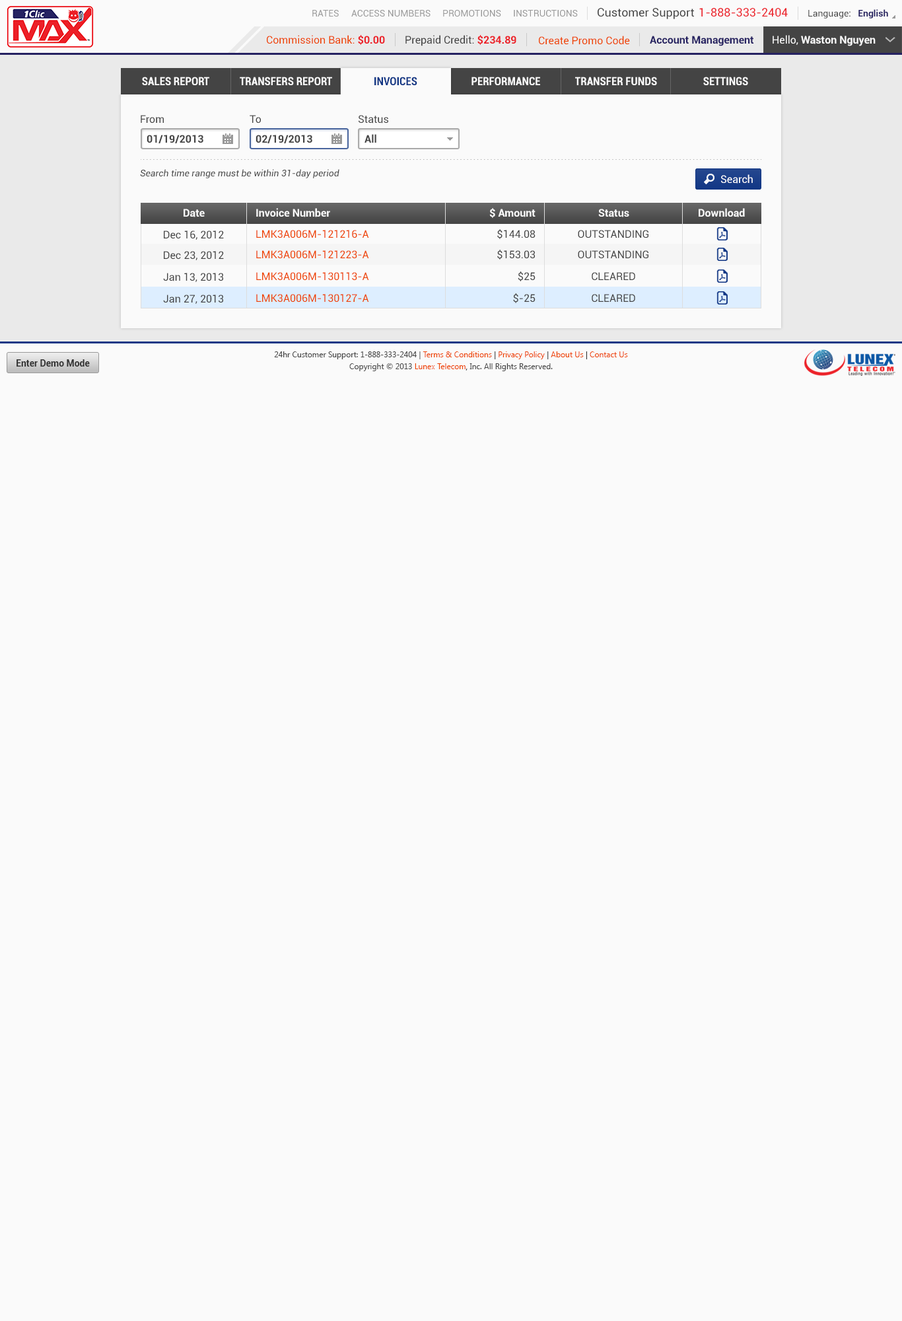
<style>
.page{position:relative;width:902px;height:1321px;background:#fafafa}
.page>*{position:absolute;margin:0}
.t1{font:9.2px "Roboto-Regular";color:#999999}
.t2{font:11.6px "Roboto-Regular";color:#444444}
.t3{font:11.6px "Roboto-Regular";color:#ec2029}
.t4{font:9.2px "Roboto-Regular";color:#444444}
.t5{font:9.2px "Roboto-Bold";color:#262262}
.t6{font:10.6px "Roboto-Regular";color:#ee4400}
.t7{font:10.6px "Roboto-Bold";color:#ec2028}
.t8{font:10.6px "Roboto-Regular";color:#444444}
.t9{font:10.6px "Roboto-Bold";color:#262262}
.t10{font:10.6px "Roboto-Bold";color:#fafafa}
.t11{font:10.6px "Roboto-Regular";color:#fafafa}
.t12{font:11.2px "Roboto-BoldCondensed";color:#fafafa}
.t13{font:11.2px "Roboto-BoldCondensed";color:#123785}
.t14{font:10.6px "Roboto-Bold";color:#444444}
.t15{font:9.2px "Roboto-Italic";color:#444444}
.t16{font:10.6px "Roboto-Regular";color:#ffffff}
.t17{font:7.9px/11.9px "SegoeUI";color:#444444}
.t18{font:7.9px/11.9px "SegoeUI";color:#ee4400}
.t19{font:7.9px/11.9px "SegoeUI";color:#333333}
.t20{font:9.2px "Roboto-Bold";color:#333333}
</style>
<div class="page">
<p class="t1" style="left:312px;top:10px;width:27px;height:7px">RATES</p>
<p class="t1" style="left:351px;top:10px;width:80px;height:7px">ACCESS NUMBERS</p>
<p class="t1" style="left:443px;top:10px;width:58px;height:7px">PROMOTIONS</p>
<p class="t1" style="left:514px;top:10px;width:64px;height:7px">INSTRUCTIONS</p>
<p class="t2" style="left:598px;top:8px;width:96px;height:11px">Customer Support</p>
<p class="t3" style="left:700px;top:8px;width:88px;height:9px">1-888-333-2404</p>
<p class="t4" style="left:809px;top:9px;width:80px;height:9px">Language:   <span class="t5">English</span></p>
<p class="t6" style="left:267px;top:35px;width:118px;height:10px">Commission Bank: <span class="t7">$0.00</span></p>
<p class="t8" style="left:406px;top:35px;width:111px;height:11px">Prepaid Credit: <span class="t7">$234.89</span></p>
<p class="t6" style="left:539px;top:36px;width:91px;height:9px">Create Promo Code</p>
<p class="t9" style="left:650px;top:36px;width:104px;height:10px">Account Management</p>
<p class="t10" style="left:773px;top:35px;width:103px;height:11px"><span class="t11">Hello, </span>Waston Nguyen</p>
<p class="t12" style="left:142px;top:77px;width:67px;height:8px">SALES REPORT</p>
<p class="t12" style="left:240px;top:77px;width:92px;height:8px">TRANSFERS REPORT</p>
<p class="t13" style="left:375px;top:77px;width:43px;height:8px">INVOICES</p>
<p class="t12" style="left:472px;top:77px;width:68px;height:8px">PERFORMANCE</p>
<p class="t12" style="left:575px;top:77px;width:82px;height:8px">TRANSFER FUNDS</p>
<p class="t12" style="left:704px;top:77px;width:45px;height:8px">SETTINGS</p>
<p class="t8" style="left:141px;top:115px;width:23px;height:8px">From</p>
<p class="t8" style="left:250px;top:115px;width:11px;height:8px">To</p>
<p class="t8" style="left:359px;top:115px;width:29px;height:9px">Status</p>
<p class="t14" style="left:147px;top:135px;width:56px;height:8px">01/19/2013</p>
<p class="t14" style="left:256px;top:135px;width:56px;height:8px">02/19/2013</p>
<p class="t14" style="left:365px;top:134px;width:12px;height:9px">All</p>
<p class="t15" style="left:140px;top:169px;width:200px;height:9px">Search time range must be within 31-day period</p>
<p class="t16" style="left:721px;top:174px;width:32px;height:10px">Search</p>
<p class="t10" style="left:184px;top:209px;width:21px;height:8px">Date</p>
<p class="t10" style="left:256px;top:208px;width:74px;height:9px">Invoice Number</p>
<p class="t10" style="left:490px;top:208px;width:46px;height:10px">$ Amount</p>
<p class="t10" style="left:599px;top:209px;width:31px;height:8px">Status</p>
<p class="t10" style="left:699px;top:208px;width:46px;height:9px">Download</p>
<p class="t8" style="left:164px;top:231px;width:60px;height:9px">Dec 16, 2012</p>
<p class="t6" style="left:256px;top:230px;width:113px;height:8px">LMK3A006M-121216-A</p>
<p class="t8" style="left:497px;top:229px;width:39px;height:10px">$144.08</p>
<p class="t8" style="left:578px;top:230px;width:71px;height:8px">OUTSTANDING</p>
<p class="t8" style="left:164px;top:251px;width:60px;height:9px">Dec 23, 2012</p>
<p class="t6" style="left:256px;top:250px;width:113px;height:8px">LMK3A006M-121223-A</p>
<p class="t8" style="left:497px;top:250px;width:38px;height:10px">$153.03</p>
<p class="t8" style="left:578px;top:250px;width:71px;height:8px">OUTSTANDING</p>
<p class="t8" style="left:163px;top:273px;width:60px;height:9px">Jan 13, 2013</p>
<p class="t6" style="left:256px;top:272px;width:113px;height:8px">LMK3A006M-130113-A</p>
<p class="t8" style="left:518px;top:272px;width:18px;height:9px">$25</p>
<p class="t8" style="left:592px;top:272px;width:44px;height:8px">CLEARED</p>
<p class="t6" style="left:256px;top:294px;width:113px;height:8px">LMK3A006M-130127-A</p>
<p class="t8" style="left:513px;top:293px;width:23px;height:10px">$-25</p>
<p class="t8" style="left:592px;top:294px;width:44px;height:8px">CLEARED</p>
<p class="t8" style="left:163px;top:295px;width:60px;height:9px">Jan 27, 2013</p>
<p class="t17" style="left:274px;top:351px;width:354px;height:20px;text-align:center">24hr Customer Support: 1-888-333-2404 | <span class="t18">Terms &amp; Conditions</span><span class="t19"> | </span><span class="t18">Privacy Policy</span><span class="t19"> | </span><span class="t18">About Us</span><span class="t19"> | </span><span class="t18">Contact Us<br></span>Copyright © 2013 <span class="t18">Lunex Telecom</span><span class="t19">,</span> Inc. All Rights Reserved.</p>
<p class="t20" style="left:17px;top:359px;width:73px;height:8px">Enter Demo Mode</p>
</div>
